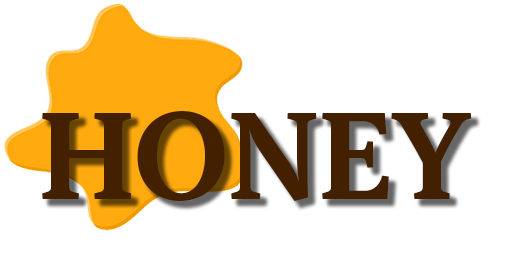
<style>
.page{position:relative;width:512px;height:256px;background:#ffffff}
.page>*{position:absolute;margin:0}
.t1{font:130px "Capitolina-Bold";letter-spacing:-0.025em;color:#432000}
</style>
<div class="page">
<p class="t1" style="left:42px;top:111px;width:430px;height:90px">HONEY</p>
</div>
